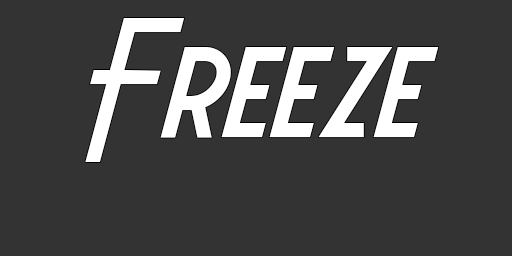
<style>
.page{position:relative;width:512px;height:256px;background:#333333}
.page>*{position:absolute;margin:0}
.t1{font:175px "AeroviasBrasilNF";color:#ffffff}
</style>
<div class="page">
<p class="t1" style="left:85px;top:18px;width:354px;height:144px">Freeze</p>
</div>
